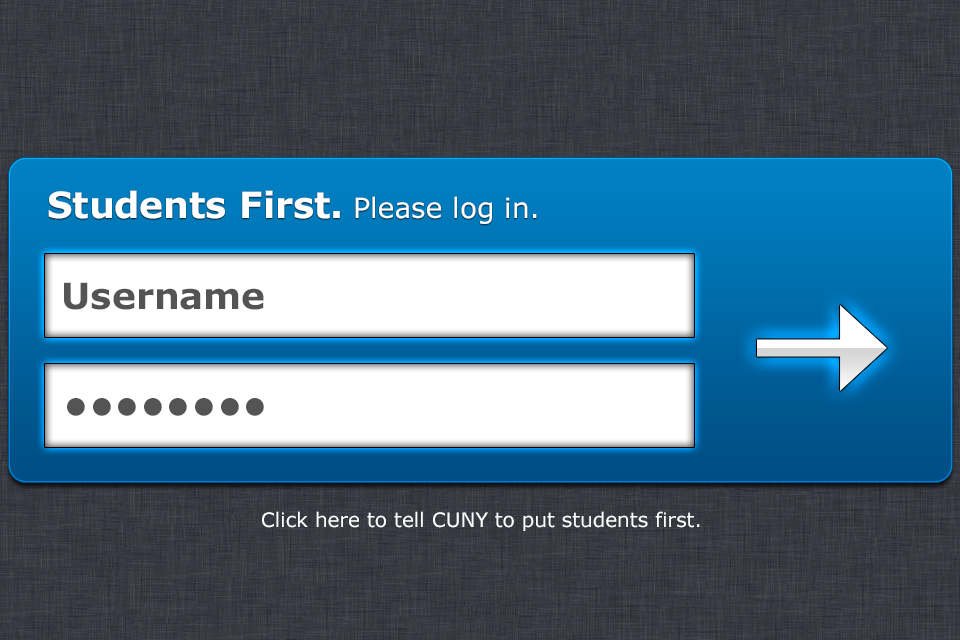
<style>
.page{position:relative;width:960px;height:640px}
.page>*{position:absolute;margin:0}
.t1{font:36px "Verdana-Bold";color:#ffffff}
.t2{font:28px "Verdana";color:#ffffff}
.t3{font:36px "Verdana-Bold";color:#545454}
.t4{font:20px "Verdana";color:#ffffff}
</style>
<div class="page">
<p class="t1" style="left:48px;top:190px;width:489px;height:34px">Students First. <span class="t2">Please log in.</span></p>
<p class="t3" style="left:64px;top:282px;width:200px;height:28px">Username</p>
<p class="t3" style="left:67px;top:398px;width:197px;height:18px">••••••••</p>
<p class="t4" style="left:262px;top:511px;width:438px;height:20px">Click here to tell CUNY to put students first.</p>
</div>
